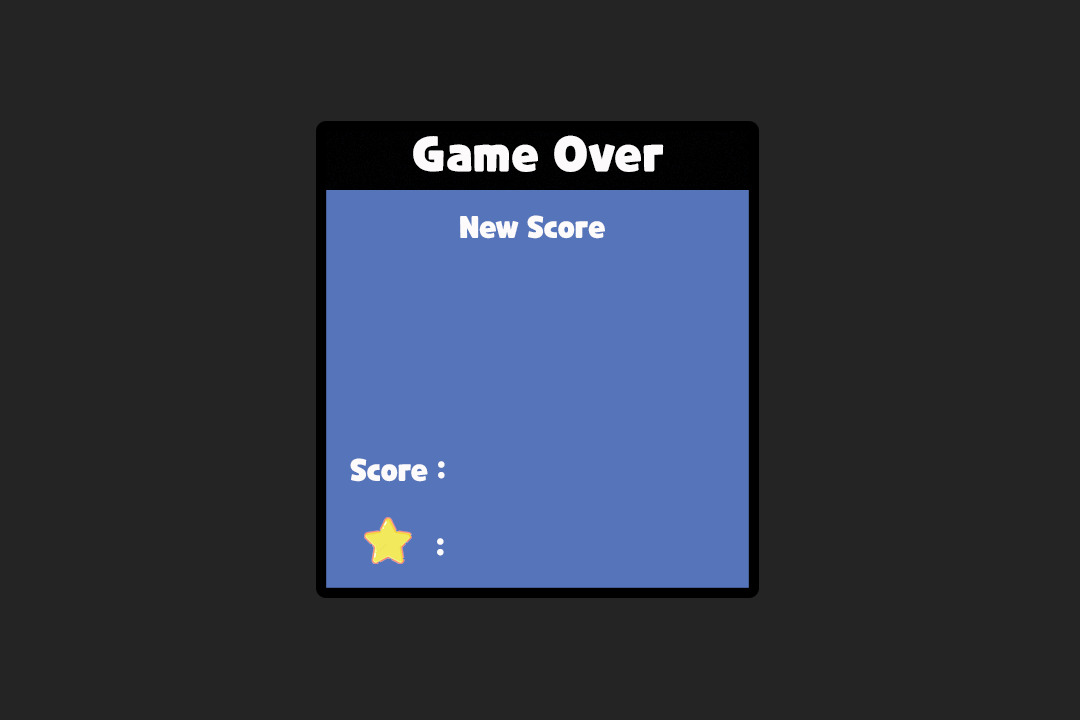
<style>
.page{position:relative;width:1080px;height:720px;background:#242424}
.page>*{position:absolute;margin:0}
.t1{font:48px "CookieRun-Black";color:#fcfafa}
.t2{font:30px "CookieRun-Black";color:#fcfafa}
</style>
<div class="page">
<p class="t1" style="left:413px;top:135px;width:251px;height:37px">Game Over</p>
<p class="t2" style="left:460px;top:215px;width:145px;height:24px">New Score</p>
<p class="t2" style="left:350px;top:458px;width:95px;height:24px">Score :</p>
<p class="t2" style="left:437px;top:538px;width:7px;height:18px">:</p>
</div>
